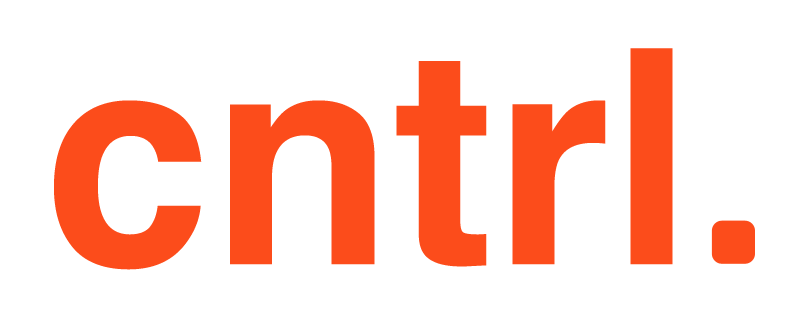
<style>
.page{position:relative;width:810px;height:336px;background:#ffffff}
.page>*{position:absolute;margin:0}
.t1{font:300px "Helvetica-Bold";color:#fc4c1b}
</style>
<div class="page">
<p class="t1" style="left:54px;top:48px;width:619px;height:222px">cntrl</p>
</div>
